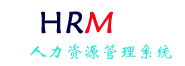
<style>
.page{position:relative;width:185px;height:66px;background:#ffffff}
.page>*{position:absolute;margin:0}
.t1{font:30px "STXinwei";color:#03033f;font-weight:bold}
.t2{font:30px "STXinwei";color:#03033f;font-weight:bold;font-style:italic}
.t3{font:30px "STXinwei";color:#f70516;font-weight:bold;font-style:italic}
.t4{font:18px "STXinwei";color:#2ae8d4}
</style>
<div class="page">
<p class="t1" style="left:40px;top:11px;width:74px;height:23px">H<span class="t2">R</span><span class="t3">M</span></p>
<p class="t4" style="left:30px;top:43px;width:142px;height:17px">人力资源管理系统</p>
</div>
